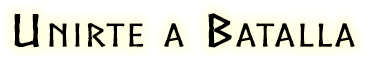
<style>
.page{position:relative;width:367px;height:61px}
.page>*{position:absolute;margin:0}
.t1{font:42.5px "Norse";color:#000000;font-variant:small-caps;font-weight:bold;scale:1.76 1}
</style>
<div class="page">
<p class="t1" style="left:14px;top:13px;width:341px;height:35px">Unirte a Batalla</p>
</div>
